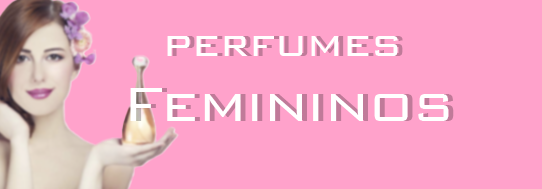
<style>
.page{position:relative;width:542px;height:189px;background:#ffa2cb}
.page>*{position:absolute;margin:0}
.t1{font:48px "BankGothicBT-Light";color:#ffffff}
.t2{font:48px "BankGothicBT-Light"}
.t3{font:64px "BankGothicBT-Light";color:#ffffff}
.t4{font:64px "BankGothicBT-Light"}
</style>
<div class="page">
<p class="t1" style="left:167px;top:36px;width:231px;height:20px">perfumes</p>
<p class="t2" style="left:172px;top:36px;width:231px;height:20px">perfumes</p>
<p class="t3" style="left:130px;top:88px;width:319px;height:33px">Femininos</p>
<p class="t4" style="left:135px;top:88px;width:319px;height:33px">Femininos</p>
</div>
